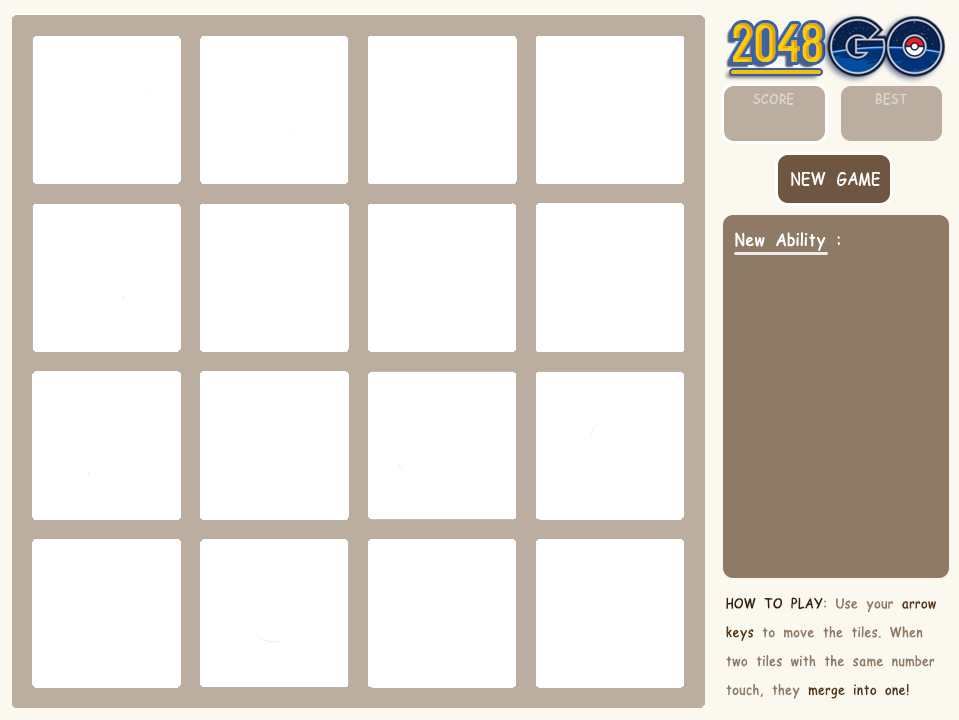
<style>
.page{position:relative;width:959px;height:720px;background:#ffffff}
.page>*{position:absolute;margin:0}
.t1{font:60px "AccidentalPresidency"}
.t2{font:24px "4711_AtNoon_Regular";color:#dbd6d1}
.t3{font:30px "4711_AtNoon_Regular";color:#ffffff}
.t4{font:24px "4711_AtNoon_Regular";color:#8f7a66}
.t5{font:24px "4711_AtNoon_Regular";color:#36220f}
.t6{font:24px "4711_AtNoon_Regular";color:#58391b}
.t7{font:24px "4711_AtNoon_Regular";color:#54361a}
</style>
<div class="page">
<p class="t1" style="left:733px;top:23px;width:90px;height:39px">2048</p>
<p class="t2" style="left:753px;top:93px;width:41px;height:12px">SCORE</p>
<p class="t2" style="left:875px;top:93px;width:33px;height:12px">BEST</p>
<p class="t3" style="left:791px;top:172px;width:89px;height:14px">NEW GAME</p>
<p class="t3" style="left:735px;top:232px;width:105px;height:19px">New Ability :</p>
<p class="t4" style="left:726px;top:597px;width:210px;height:102px;text-align:right"><span class="t5">HOW TO PLAY</span>: Use your <span class="t6">arrow keys</span> to move the tiles. When two tiles with the same number touch, they <span class="t7">merge into one!</span></p>
</div>
